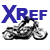
<style>
.page{position:relative;width:50px;height:50px;background:#ffffff}
.page>*{position:absolute;margin:0}
.t1{font:25px "Arial-BoldMT";color:#3128a5}
.t2{font:13.9px "Arial-Black";color:#3128a5}
.t3{font:16.7px "Arial-Black";color:#3128a5}
</style>
<div class="page">
<p class="t1" style="left:1px;top:5px;width:17px;height:18px">X</p>
<p class="t2" style="left:16px;top:8px;width:32px;height:12px"><span class="t3">R</span>EF</p>
</div>
